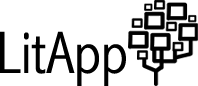
<style>
.page{position:relative;width:198px;height:86px;background:#ffffff}
.page>*{position:absolute;margin:0}
.t1{font:60px "AbadiMT-CondensedLight";color:#000000;scale:1.05 1}
</style>
<div class="page">
<p class="t1" style="left:0px;top:31px;width:126px;height:55px">LitApp</p>
</div>
